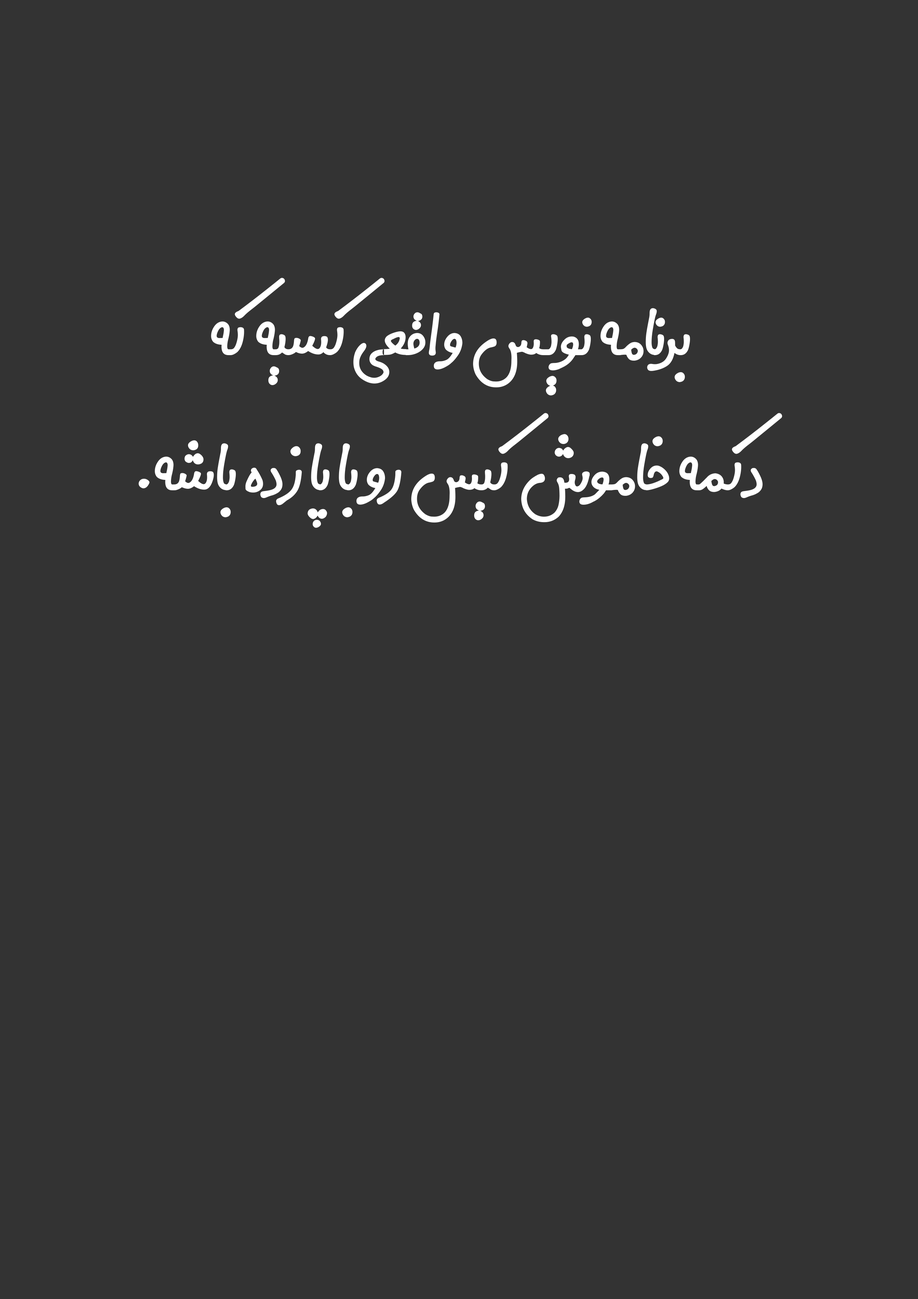
<style>
.page{position:relative;width:918px;height:1299px;background:#333333}
.page>*{position:absolute;margin:0}
.t1{font:93.7px/135.1px "Digi-Gran-Payeh-Bold";color:#ffffff}
</style>
<div class="page">
<p class="t1" style="left:138px;top:278px;width:644px;height:250px;text-align:center">برنامه نویس واقعی کسیه که<br>دکمه خاموش کیس رو با پا زده باشه.</p>
</div>
